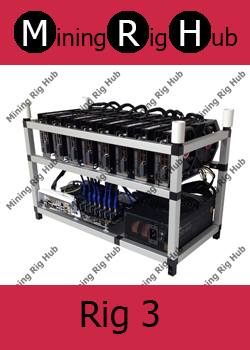
<style>
.page{position:relative;width:250px;height:350px;background:#cc2745}
.page>*{position:absolute;margin:0}
.t1{font:36px "Tahoma";color:#ffffff}
.t2{font:24px "Tahoma";color:#000000}
.t3{font:36px "Tahoma";color:#000000}
</style>
<div class="page">
<p class="t1" style="left:23px;top:20px;width:24px;height:26px">M</p>
<p class="t2" style="left:57px;top:28px;width:49px;height:23px">ining</p>
<p class="t1" style="left:119px;top:20px;width:21px;height:26px">R</p>
<p class="t2" style="left:150px;top:28px;width:17px;height:23px">ig</p>
<p class="t1" style="left:180px;top:20px;width:20px;height:26px">H</p>
<p class="t2" style="left:212px;top:27px;width:26px;height:19px">ub</p>
<p class="t3" style="left:81px;top:300px;width:78px;height:34px">Rig 3</p>
</div>
